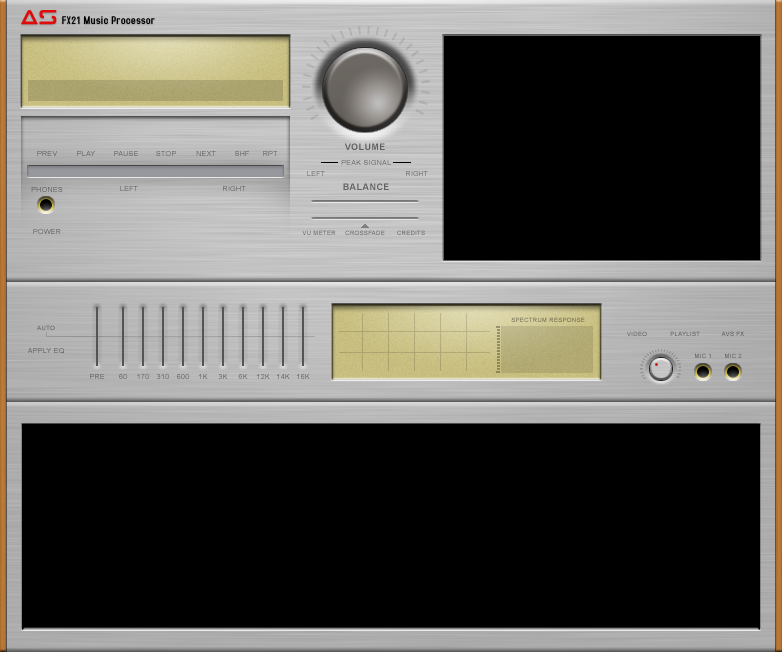
<style>
.page{position:relative;width:782px;height:652px;background:#000000}
.page>*{position:absolute;margin:0}
.t1{font:18px "Tele-Marines";color:#e00b0b;font-weight:bold}
.t2{font:12px "AccidentalPresidency";letter-spacing:0.05em;color:#000000}
.t3{font:9px "Arial-BoldMT";letter-spacing:0.05em;color:#606060}
.t4{font:7px "ArialMT";letter-spacing:0.05em}
.t5{font:9px "Arial-BoldMT";letter-spacing:0.05em;color:#626262}
.t6{font:6px "ArialMT";letter-spacing:0.05em}
</style>
<div class="page">
<p class="t1" style="left:21px;top:10px;width:36px;height:15px">as</p>
<p class="t2" style="left:62px;top:16px;width:93px;height:8px">FX21 Music Processor</p>
<p class="t3" style="left:344px;top:143px;width:41px;height:7px">VOLUME</p>
<p class="t4" style="left:37px;top:151px;width:20px;height:5px">PREV</p>
<p class="t4" style="left:77px;top:151px;width:18px;height:5px">PLAY</p>
<p class="t4" style="left:114px;top:151px;width:24px;height:5px">PAUSE</p>
<p class="t4" style="left:156px;top:151px;width:20px;height:5px">STOP</p>
<p class="t4" style="left:196px;top:151px;width:20px;height:5px">NEXT</p>
<p class="t4" style="left:235px;top:151px;width:14px;height:5px">SHF</p>
<p class="t4" style="left:263px;top:151px;width:15px;height:5px">RPT</p>
<p class="t4" style="left:341px;top:160px;width:50px;height:5px">PEAK SIGNAL</p>
<p class="t4" style="left:307px;top:171px;width:18px;height:5px">LEFT</p>
<p class="t5" style="left:343px;top:183px;width:46px;height:7px">BALANCE</p>
<p class="t4" style="left:31px;top:187px;width:32px;height:5px">PHONES</p>
<p class="t4" style="left:120px;top:186px;width:18px;height:5px">LEFT</p>
<p class="t4" style="left:223px;top:186px;width:23px;height:5px">RIGHT</p>
<p class="t4" style="left:33px;top:229px;width:28px;height:5px">POWER</p>
<p class="t6" style="left:302px;top:230px;width:34px;height:5px">VU METER</p>
<p class="t6" style="left:345px;top:230px;width:40px;height:5px">CROSSFADE</p>
<p class="t6" style="left:397px;top:230px;width:28px;height:5px">CREDITS</p>
<p class="t6" style="left:511px;top:317px;width:74px;height:5px">SPECTRUM RESPONSE</p>
<p class="t6" style="left:37px;top:325px;width:18px;height:5px">AUTO</p>
<p class="t6" style="left:627px;top:331px;width:20px;height:5px">VIDEO</p>
<p class="t6" style="left:670px;top:331px;width:30px;height:5px">PLAYLIST</p>
<p class="t6" style="left:721px;top:331px;width:23px;height:5px">AVS FX</p>
<p class="t4" style="left:28px;top:348px;width:36px;height:6px">APPLY EQ</p>
<p class="t6" style="left:695px;top:353px;width:16px;height:5px">MIC 1</p>
<p class="t6" style="left:725px;top:353px;width:17px;height:5px">MIC 2</p>
<p class="t4" style="left:90px;top:374px;width:15px;height:5px">PRE</p>
<p class="t4" style="left:119px;top:374px;width:8px;height:5px">60</p>
<p class="t4" style="left:137px;top:374px;width:12px;height:5px">170</p>
<p class="t4" style="left:157px;top:374px;width:12px;height:5px">310</p>
<p class="t4" style="left:177px;top:374px;width:12px;height:5px">600</p>
<p class="t4" style="left:199px;top:374px;width:9px;height:5px">1K</p>
<p class="t4" style="left:218px;top:374px;width:10px;height:5px">3K</p>
<p class="t4" style="left:238px;top:374px;width:10px;height:5px">6K</p>
<p class="t4" style="left:257px;top:374px;width:13px;height:5px">12K</p>
<p class="t4" style="left:277px;top:374px;width:13px;height:5px">14K</p>
<p class="t4" style="left:297px;top:374px;width:13px;height:5px">16K</p>
</div>
